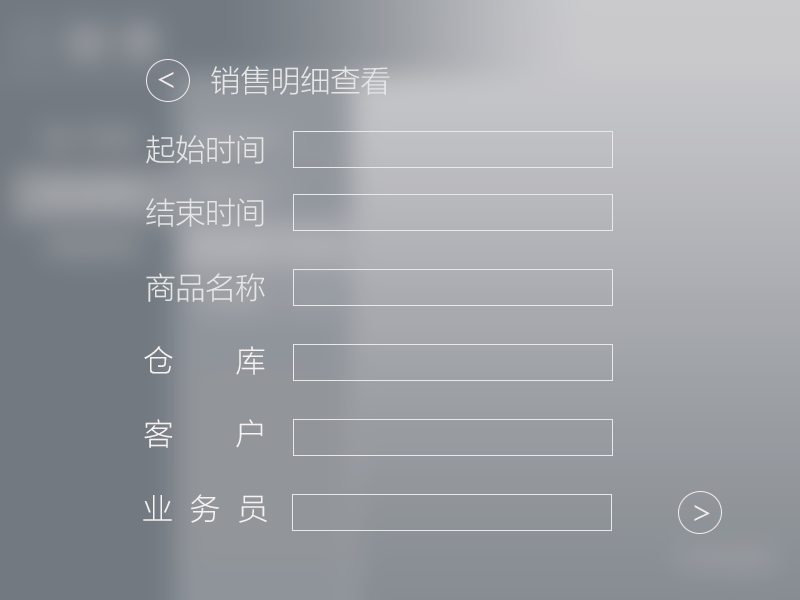
<style>
.page{position:relative;width:800px;height:600px}
.page>*{position:absolute;margin:0}
.t1{font:30px "MicrosoftYaHeiLight";color:#e6e6e6}
.t2{font:30px "MicrosoftYaHeiLight";color:#f7f2f2}
</style>
<div class="page">
<p class="t1" style="left:211px;top:66px;width:179px;height:29px">销售明细查看</p>
<p class="t1" style="left:146px;top:135px;width:118px;height:29px">起始时间</p>
<p class="t1" style="left:146px;top:198px;width:118px;height:29px">结束时间</p>
<p class="t1" style="left:146px;top:273px;width:119px;height:29px">商品名称</p>
<p class="t2" style="left:144px;top:346px;width:121px;height:29px">仓       库</p>
<p class="t2" style="left:144px;top:419px;width:119px;height:29px">客       户</p>
<p class="t2" style="left:143px;top:494px;width:124px;height:29px">业  务  员</p>
</div>
